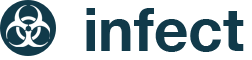
<style>
.page{position:relative;width:252px;height:60px;background:#ffffff}
.page>*{position:absolute;margin:0}
.t1{font:60px "HelveticaNeue-Bold";color:#113a4a}
</style>
<div class="page">
<p class="t1" style="left:86px;top:8px;width:158px;height:44px">infect</p>
</div>
